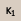
<style>
.page{position:relative;width:21px;height:21px;background:#d9cdc1}
.page>*{position:absolute;margin:0}
.t1{font:9px "Tahoma";color:#000000}
.t2{font:8px "Tahoma";color:#000000}
</style>
<div class="page">
<p class="t1" style="left:6px;top:7px;width:6px;height:7px">K</p>
<p class="t2" style="left:11px;top:10px;width:4px;height:6px">1</p>
</div>
